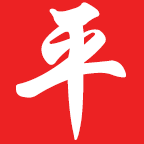
<style>
.page{position:relative;width:144px;height:144px;background:#ec2223}
.page>*{position:absolute;margin:0}
.t1{font:142px "FZXKFW--GB1-0";color:#ffffff;font-weight:bold}
</style>
<div class="page">
<p class="t1" style="left:16px;top:2px;width:110px;height:138px">平</p>
</div>
